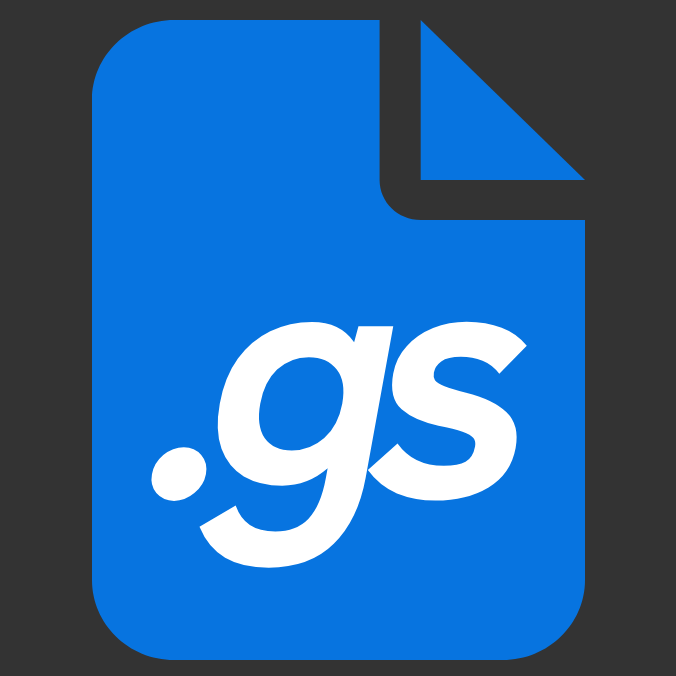
<style>
.page{position:relative;width:676px;height:676px;background:#0774e0}
.page>*{position:absolute;margin:0}
.t1{font:355px "ZenKakuGothicAntique-Bold";letter-spacing:-0.087em;color:#ffffff;font-style:italic}
</style>
<div class="page">
<p class="t1" style="left:149px;top:321px;width:378px;height:247px">.gs</p>
</div>
